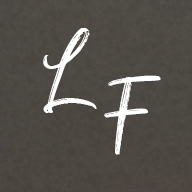
<style>
.page{position:relative;width:192px;height:192px}
.page>*{position:absolute;margin:0}
.t1{font:98px/48px "Milea-Regular";color:#ffffff}
</style>
<div class="page">
<p class="t1" style="left:43px;top:28px;width:118px;height:127px;text-align:center">L <br>     F</p>
</div>
